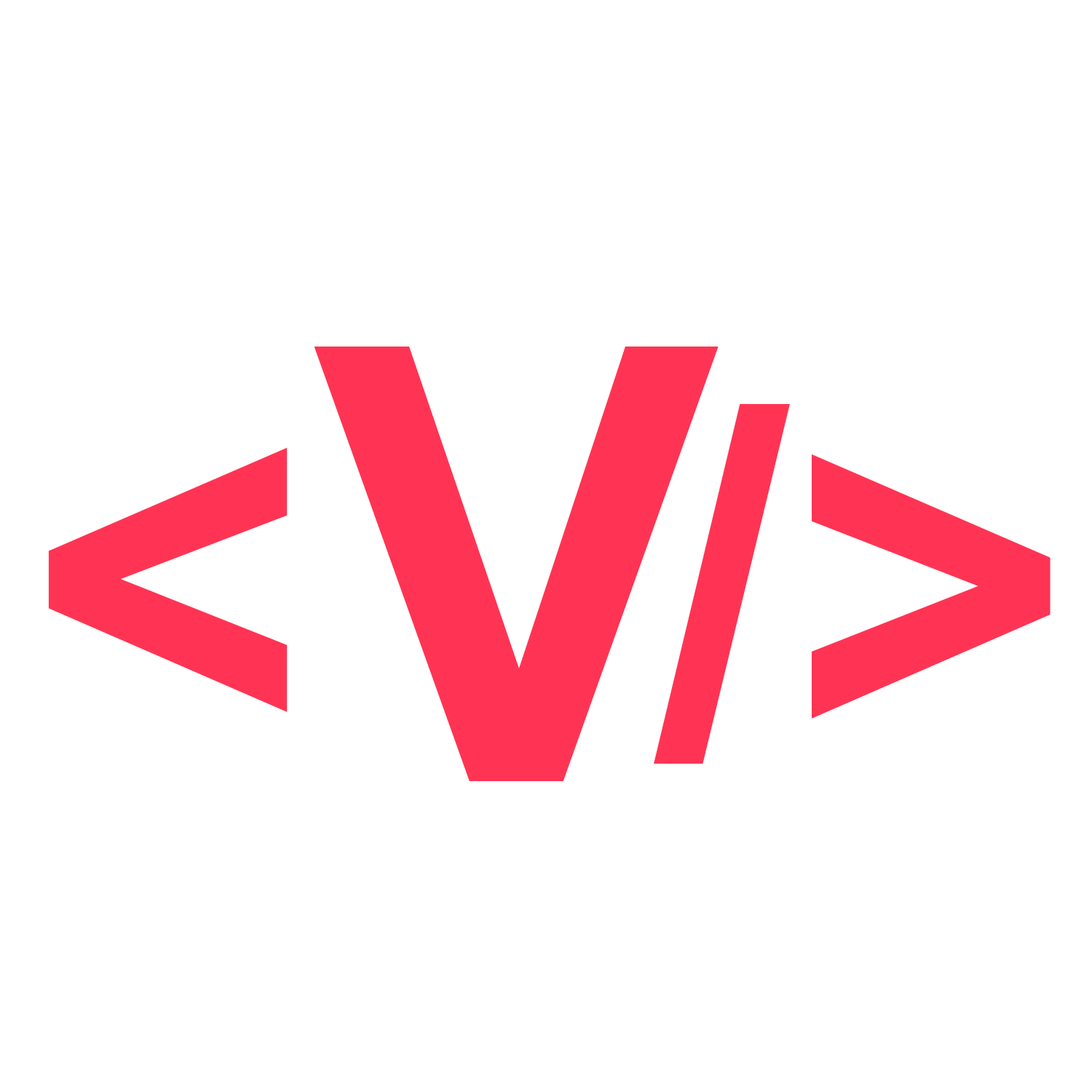
<style>
.page{position:relative;width:1092px;height:1092px;background:#ffffff}
.page>*{position:absolute;margin:0}
.t1{font:606.7px "Arial-BoldMT";color:#ff3454}
.t2{font:485.3px "Arial-BoldMT";color:#ff3454}
</style>
<div class="page">
<p class="t1" style="left:314px;top:347px;width:405px;height:434px">V</p>
<p class="t2" style="left:654px;top:404px;width:396px;height:360px">/&gt;</p>
<p class="t2" style="left:48px;top:448px;width:240px;height:264px">&lt;</p>
</div>
